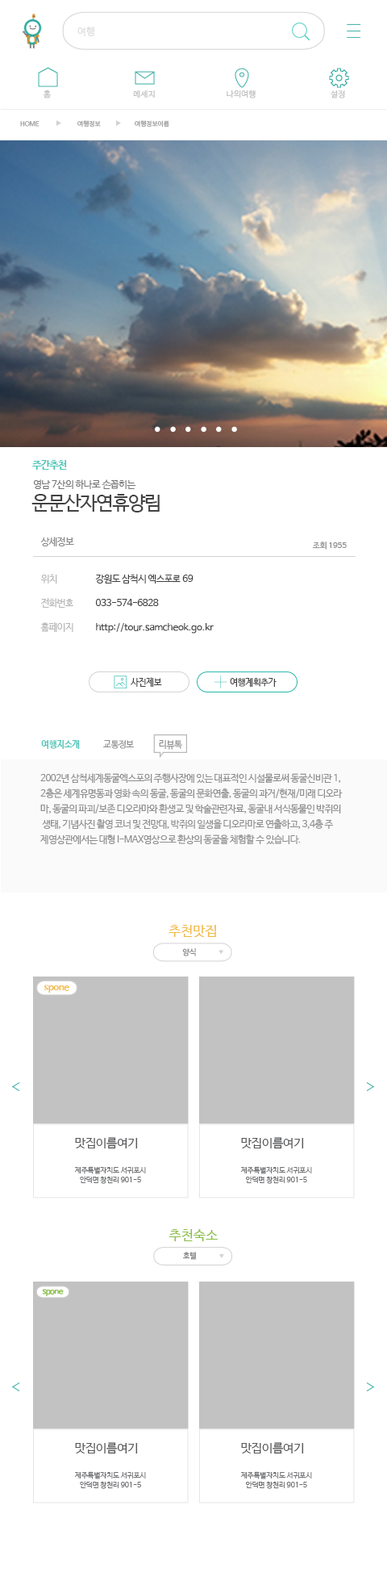
<style>
.page{position:relative;width:387px;height:1581px;background:#ffffff}
.page>*{position:absolute;margin:0}
.t1{font:9.7px "NanumBarunGothic";letter-spacing:0.025em;color:#dcdcdc}
.t2{font:8.1px "NanumBarunGothic";letter-spacing:0.025em;color:#bfbfbf}
.t3{font:6.5px "NanumBarunGothic";color:#999a9a}
.t4{font:10.2px "NanumBarunGothicBold";letter-spacing:-0.05em;color:#4bc5b9}
.t5{font:9.5px "NanumBarunGothic";letter-spacing:-0.025em;color:#767474}
.t6{font:19.1px "NanumBarunGothic";letter-spacing:-0.05em;color:#424242}
.t7{font:9.3px "NanumBarunGothic";letter-spacing:-0.025em;color:#8b8888}
.t8{font:8.1px "NanumBarunGothic";letter-spacing:-0.025em;color:#8b8888}
.t9{font:9.3px "NanumBarunGothic";letter-spacing:-0.025em;color:#b7b6b6}
.t10{font:9.3px "NanumBarunGothic";letter-spacing:-0.025em;color:#424242}
.t11{font:9.3px "NanumBarunGothic";color:#424242}
.t12{font:8.9px "NanumBarunGothic";letter-spacing:-0.025em;color:#424242}
.t13{font:9px "NanumBarunGothicBold";letter-spacing:-0.05em;color:#4bc5b9}
.t14{font:9px "NanumBarunGothic";letter-spacing:-0.05em;color:#8e8e8e}
.t15{font:9.7px/15.3px "NanumBarunGothic";letter-spacing:-0.05em;color:#8e8e8e}
.t16{font:13.6px "NanumBarunGothic";color:#f1ba44}
.t17{font:7.7px "NanumBarunGothic";letter-spacing:-0.025em;color:#818181}
.t18{font:9.9px "NanumBarunGothicBold";letter-spacing:-0.05em;color:#f1ba44}
.t19{font:12.2px "NanumBarunGothic";letter-spacing:-0.025em;color:#58595b}
.t20{font:7.3px/9.8px "NanumBarunGothic";letter-spacing:-0.025em;color:#6d6e71}
.t21{font:13.6px "NanumBarunGothic";color:#89bf44}
.t22{font:8px "NanumBarunGothicBold";letter-spacing:-0.05em;color:#89bf44}
</style>
<div class="page">
<p class="t1" style="left:77px;top:27px;width:17px;height:9px">여행</p>
<p class="t2" style="left:43px;top:90px;width:9px;height:8px">홈</p>
<p class="t2" style="left:227px;top:90px;width:29px;height:8px">나의여행</p>
<p class="t2" style="left:133px;top:90px;width:22px;height:8px">메세지</p>
<p class="t2" style="left:331px;top:90px;width:14px;height:8px">설정</p>
<p class="t3" style="left:20px;top:121px;width:20px;height:6px">HOME</p>
<p class="t3" style="left:77px;top:120px;width:24px;height:8px">여행정보</p>
<p class="t3" style="left:135px;top:120px;width:34px;height:8px">여행정보이름</p>
<p class="t4" style="left:32px;top:460px;width:35px;height:10px">주간추천</p>
<p class="t5" style="left:33px;top:479px;width:103px;height:10px">영남 7산의 하나로 손꼽히는</p>
<p class="t6" style="left:31px;top:494px;width:129px;height:19px">운문산자연휴양림</p>
<p class="t7" style="left:40px;top:537px;width:34px;height:9px">상세정보</p>
<p class="t8" style="left:312px;top:542px;width:35px;height:8px">조회 1955</p>
<p class="t9" style="left:41px;top:575px;width:16px;height:9px">위치</p>
<p class="t10" style="left:95px;top:574px;width:99px;height:10px">강원도 삼척시 엑스포로 69</p>
<p class="t9" style="left:40px;top:598px;width:33px;height:10px">전화번호</p>
<p class="t10" style="left:95px;top:599px;width:64px;height:7px">033-574-6828</p>
<p class="t9" style="left:40px;top:622px;width:33px;height:10px">홈페이지</p>
<p class="t11" style="left:96px;top:622px;width:118px;height:12px">http://tour.samcheok.go.kr</p>
<p class="t12" style="left:131px;top:677px;width:31px;height:10px">사진제보</p>
<p class="t12" style="left:230px;top:678px;width:47px;height:9px">여행계획추가</p>
<p class="t13" style="left:41px;top:740px;width:39px;height:9px">여행지소개</p>
<p class="t14" style="left:103px;top:740px;width:31px;height:9px">교통정보</p>
<p class="t14" style="left:159px;top:740px;width:24px;height:10px">리뷰톡</p>
<p class="t15" style="left:40px;top:773px;width:303px;height:71px">2002년 삼척세계동굴엑스포의 주행사장에 있는 대표적인 시설물로써 동굴신비관 1, <br>2층은 세계유명동과 영화 속의 동굴, 동굴의 문화연출, 동굴의 과거/현재/미래 디오라<br>마, 동굴의 파괴/보존 디오라마와 환생교 및 학술관련자료, 동굴내 서식동물인 박쥐의<br> 생태, 기념사진 촬영 코너 및 전망대, 박쥐의 일생을 디오라마로 연출하고, 3,4층 주<br>제영상관에서는 대형 I-MAX영상으로 환상의 동굴을 체험할 수 있습니다.</p>
<p class="t16" style="left:169px;top:925px;width:47px;height:13px">추천맛집</p>
<p class="t17" style="left:182px;top:948px;width:14px;height:8px">양식</p>
<p class="t18" style="left:44px;top:985px;width:25px;height:8px">spone</p>
<p class="t19" style="left:75px;top:1137px;width:63px;height:12px">맛집이름여기</p>
<p class="t19" style="left:241px;top:1137px;width:63px;height:12px">맛집이름여기</p>
<p class="t20" style="left:74px;top:1166px;width:72px;height:18px;text-align:center">제주특별자치도 서귀포시<br>안덕면 창천리 901-5</p>
<p class="t20" style="left:241px;top:1166px;width:71px;height:18px;text-align:center">제주특별자치도 서귀포시<br>안덕면 창천리 901-5</p>
<p class="t21" style="left:169px;top:1229px;width:49px;height:12px">추천숙소</p>
<p class="t17" style="left:183px;top:1252px;width:14px;height:8px">호텔</p>
<p class="t22" style="left:42px;top:1289px;width:22px;height:7px">spone</p>
<p class="t19" style="left:75px;top:1442px;width:63px;height:12px">맛집이름여기</p>
<p class="t19" style="left:241px;top:1442px;width:63px;height:12px">맛집이름여기</p>
<p class="t20" style="left:74px;top:1471px;width:72px;height:18px;text-align:center">제주특별자치도 서귀포시<br>안덕면 창천리 901-5</p>
<p class="t20" style="left:241px;top:1471px;width:71px;height:18px;text-align:center">제주특별자치도 서귀포시<br>안덕면 창천리 901-5</p>
</div>
